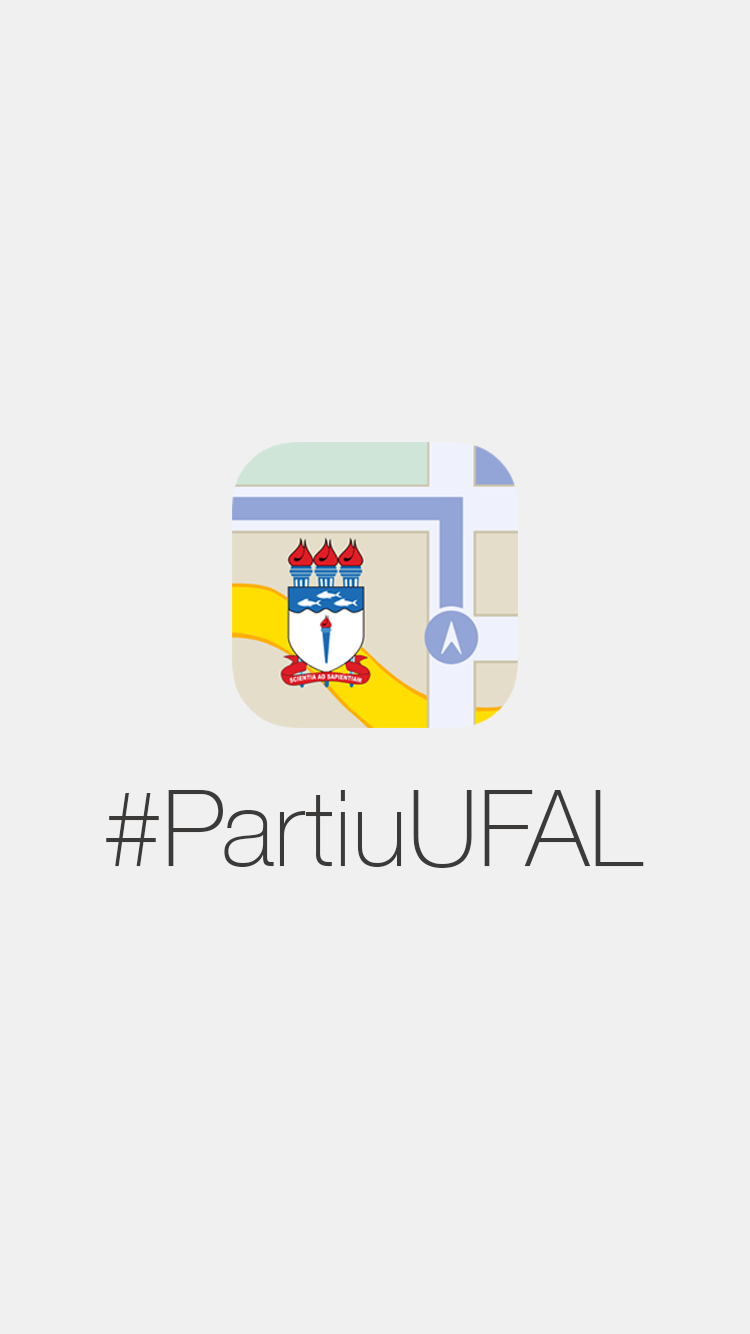
<style>
.page{position:relative;width:750px;height:1334px;background:#f0f0f0}
.page>*{position:absolute;margin:0}
.t1{font:105.8px "HelveticaNeue-Thin";color:#3b3a39}
</style>
<div class="page">
<p class="t1" style="left:106px;top:790px;width:538px;height:78px">#PartiuUFAL</p>
</div>
